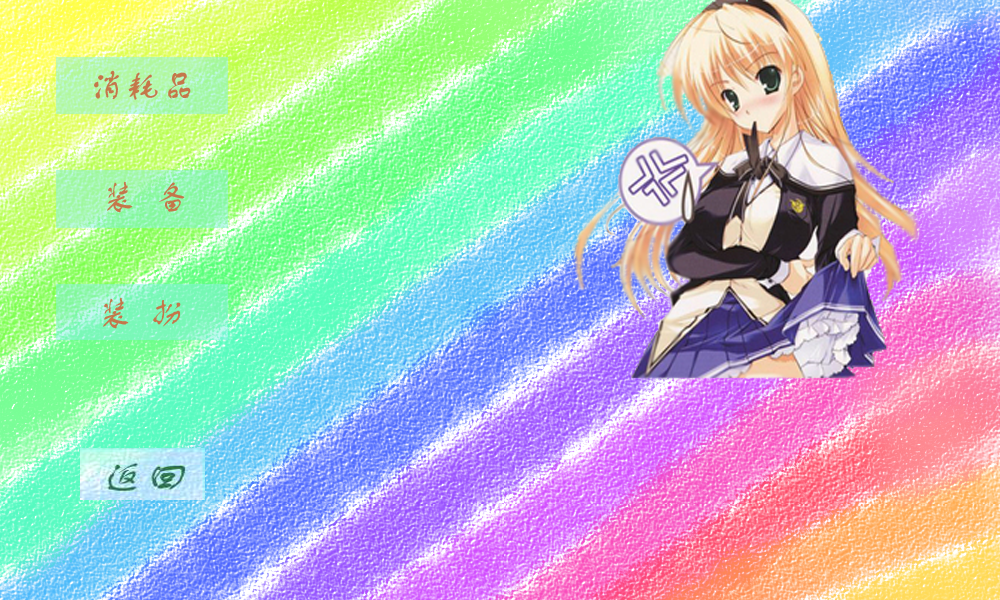
<style>
.page{position:relative;width:1000px;height:600px}
.page>*{position:absolute;margin:0}
.t1{font:36px "FZSTK--GBK1-0";color:#c5764a}
</style>
<div class="page">
<p class="t1" style="left:94px;top:70px;width:97px;height:30px">消耗品</p>
<p class="t1" style="left:107px;top:181px;width:78px;height:32px">装  备</p>
<p class="t1" style="left:103px;top:297px;width:78px;height:32px">装  扮</p>
</div>
